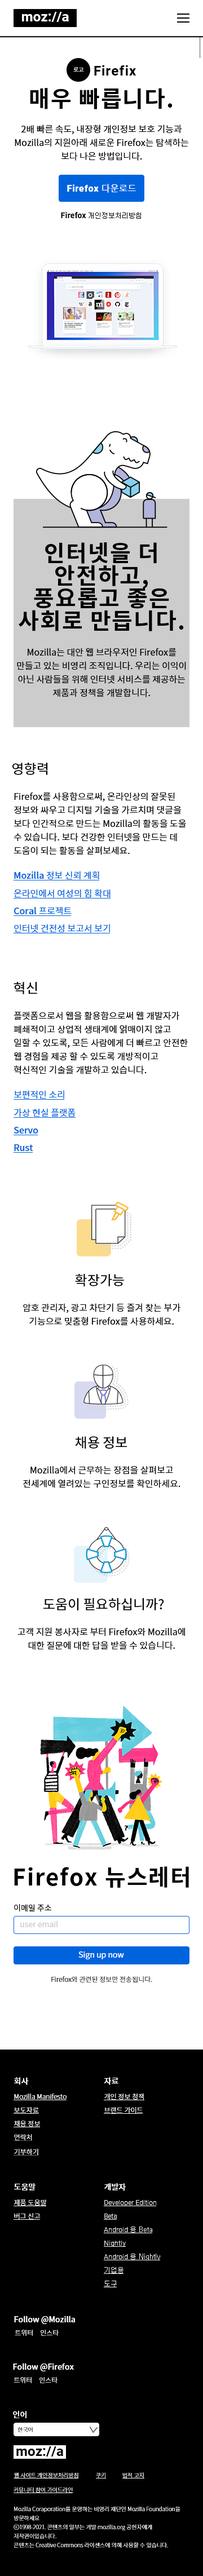
<style>
.page{position:relative;width:203px;height:2576px;background:#ffffff}
.page>*{position:absolute;margin:0}
.t1{font:13.5px "Roboto-Bold";color:#fefefe}
.t2{font:13.5px "Roboto-Bold";letter-spacing:0.05em;color:#000000}
.t3{font:5.6px "NotoSansKR-Regular";color:#ffffff}
.t4{font:22.5px "NotoSansKR-Bold";letter-spacing:0.05em;color:#000000}
.t5{font:9px/13.5px "NotoSansKR-Regular";color:#000000}
.t6{font:9px "Roboto-Black";letter-spacing:0.05em;color:#fefefe}
.t7{font:9px "NotoSansKR-Regular";letter-spacing:0.05em;color:#fefefe}
.t8{font:6.8px "Gulim";color:#000000}
.t9{font:7.9px "Roboto-Bold";color:#000000}
.t10{font:22.5px/22.5px "NotoSansKR-Bold";letter-spacing:0.05em;color:#000000}
.t11{font:13.5px "NotoSansKR-Regular";color:#000000}
.t12{font:9px "NotoSansKR-Regular";color:#0063de}
.t13{font:9px "NotoSansKR-Medium";color:#0063de}
.t14{font:7.9px "NotoSansKR-Regular";color:#000000}
.t15{font:7.9px "NotoSansKR-Regular";color:#cccccc}
.t16{font:7.9px "NotoSansKR-Regular";color:#ffffff}
.t17{font:6.8px "NotoSansKR-Light";color:#000000}
.t18{font:7.9px "NotoSansKR-Medium";color:#fffefe}
.t19{font:6.8px "NotoSansKR-Light";color:#fffefe}
.t20{font:6.8px "Roboto-Light";color:#fffefe}
.t21{font:6.8px "Gulim";color:#fffefe}
.t22{font:5.6px "NotoSansKR-Light";color:#000000}
.t23{font:13.5px "Roboto-Bold";color:#000000}
.t24{font:5.6px "NotoSansKR-Thin";color:#ffffff}
.t25{font:5.6px/9px "NotoSansKR-Thin";color:#ffffff}
</style>
<div class="page">
<p class="t1" style="left:22px;top:12px;width:47px;height:10px">moz://a</p>
<p class="t2" style="left:94px;top:65px;width:42px;height:11px">Firefix</p>
<p class="t3" style="left:73px;top:67px;width:11px;height:5px">로고</p>
<p class="t4" style="left:30px;top:88px;width:142px;height:21px">매우 빠릅니다.</p>
<p class="t5" style="left:15px;top:125px;width:173px;height:36px;text-align:center">2배 빠른 속도, 내장형 개인정보 보호 기능과 Mozilla의 지원아래 새로운 Firefox는 탐색하는 보다 나은 방법입니다.</p>
<p class="t6" style="left:67px;top:184px;width:69px;height:9px">Firefox <span class="t7">다운로드</span></p>
<p class="t8" style="left:61px;top:212px;width:80px;height:7px"><span class="t9">Firefox</span> 개인정보처리방침</p>
<p class="t10" style="left:19px;top:542px;width:165px;height:89px;text-align:center">인터넷을 더 안전하고, 풍요롭고 좋은 사회로 만듭니다.</p>
<p class="t5" style="left:17px;top:648px;width:169px;height:49px;text-align:center">Mozilla는 대안 웹 브라우저인 Firefox를 만들고 있는 비영리 조직입니다. 우리는 이익이 아닌 사람들을 위해 인터넷 서비스를 제공하는 제품과 정책을 개발합니다.</p>
<p class="t11" style="left:12px;top:762px;width:36px;height:13px">영향력</p>
<p class="t5" style="left:14px;top:792px;width:172px;height:63px">Firefox를 사용함으로써, 온라인상의 잘못된 정보와 싸우고 디지털 기술을 가르치며 댓글을 보다 인간적으로 만드는 Mozilla의 활동을 도울 수 있습니다. 보다 건강한 인터넷을 만드는 데 도움이 되는 활동을 살펴보세요.</p>
<p class="t12" style="left:14px;top:871px;width:85px;height:8px"><span class="t13">Mozilla </span>정보 신뢰 계획</p>
<p class="t12" style="left:14px;top:889px;width:96px;height:9px">온라인에서 여성의 힘 확대</p>
<p class="t13" style="left:14px;top:906px;width:58px;height:9px">Coral <span class="t12">프로젝트</span></p>
<p class="t12" style="left:14px;top:924px;width:96px;height:9px">인터넷 건전성 보고서 보기</p>
<p class="t11" style="left:14px;top:982px;width:23px;height:12px">혁신</p>
<p class="t5" style="left:14px;top:1011px;width:174px;height:63px">플랫폼으로서 웹을 활용함으로써 웹 개발자가 폐쇄적이고 상업적 생태계에 얽매이지 않고 일할 수 있도록, 모든 사람에게 더 빠르고 안전한 웹 경험을 제공 할 수 있도록 개방적이고 혁신적인 기술을 개발하고 있습니다.</p>
<p class="t12" style="left:14px;top:1090px;width:50px;height:9px">보편적인 소리</p>
<p class="t12" style="left:14px;top:1108px;width:62px;height:9px">가상 현실 플랫폼</p>
<p class="t13" style="left:14px;top:1127px;width:24px;height:7px">Servo</p>
<p class="t13" style="left:14px;top:1144px;width:19px;height:7px">Rust</p>
<p class="t11" style="left:75px;top:1274px;width:49px;height:12px">확장가능</p>
<p class="t5" style="left:23px;top:1303px;width:157px;height:23px;text-align:center">암호 관리자, 광고 차단기 등 즐겨 찾는 부가 기능으로 밎춤형 Firefox를 사용하세요.</p>
<p class="t11" style="left:75px;top:1436px;width:52px;height:13px">채용 정보</p>
<p class="t5" style="left:23px;top:1466px;width:157px;height:22px;text-align:center">Mozilla에서 근무하는 장점을 살펴보고 전세계에 열려있는 구인정보를 확인하세요.</p>
<p class="t11" style="left:43px;top:1598px;width:121px;height:12px">도움이 필요하십니까?</p>
<p class="t5" style="left:17px;top:1627px;width:168px;height:23px;text-align:center">고객 지원 봉사자로 부터 Firefox와 Mozilla에 대한 질문에 대한 답을 받을 수 있습니다.</p>
<p class="t4" style="left:14px;top:1866px;width:175px;height:22px">Firefox 뉴스레터</p>
<p class="t14" style="left:14px;top:1904px;width:37px;height:8px">이메일 주소</p>
<p class="t15" style="left:20px;top:1920px;width:38px;height:7px">user email</p>
<p class="t16" style="left:78px;top:1951px;width:46px;height:8px">Sign up now</p>
<p class="t17" style="left:51px;top:1976px;width:101px;height:6px">Firefox와 관련된 정보만 전송됩니다.</p>
<p class="t18" style="left:14px;top:2077px;width:15px;height:8px">회사</p>
<p class="t18" style="left:104px;top:2077px;width:14px;height:8px">자료</p>
<p class="t19" style="left:14px;top:2093px;width:53px;height:6px">Mozilla Manifesto</p>
<p class="t19" style="left:104px;top:2093px;width:40px;height:7px">개인 정보 청잭</p>
<p class="t19" style="left:14px;top:2107px;width:25px;height:6px">보도자료</p>
<p class="t19" style="left:104px;top:2107px;width:39px;height:6px">브랜드 가이드</p>
<p class="t19" style="left:14px;top:2121px;width:26px;height:6px">채용 정보</p>
<p class="t19" style="left:14px;top:2134px;width:18px;height:6px">연락처</p>
<p class="t19" style="left:14px;top:2149px;width:24px;height:6px">기부하기</p>
<p class="t18" style="left:14px;top:2183px;width:22px;height:7px">도움말</p>
<p class="t18" style="left:104px;top:2183px;width:22px;height:8px">개발자</p>
<p class="t19" style="left:14px;top:2199px;width:33px;height:7px">제품 도움말</p>
<p class="t20" style="left:104px;top:2200px;width:52px;height:6px">Developer Edition</p>
<p class="t19" style="left:14px;top:2213px;width:27px;height:6px">버그 신고</p>
<p class="t20" style="left:104px;top:2214px;width:13px;height:5px">Beta</p>
<p class="t20" style="left:104px;top:2227px;width:48px;height:6px">Android <span class="t21">용 Beta</span></p>
<p class="t20" style="left:104px;top:2241px;width:22px;height:6px">Nightly</p>
<p class="t21" style="left:104px;top:2254px;width:56px;height:6px"><span class="t20">Android </span>용 Nightly</p>
<p class="t21" style="left:104px;top:2267px;width:19px;height:6px">기업용</p>
<p class="t21" style="left:104px;top:2281px;width:13px;height:6px">도구</p>
<p class="t18" style="left:14px;top:2316px;width:61px;height:8px">Follow @Mozilla</p>
<p class="t19" style="left:15px;top:2330px;width:18px;height:6px">트위터</p>
<p class="t19" style="left:41px;top:2330px;width:18px;height:6px">인스타</p>
<p class="t18" style="left:13px;top:2363px;width:61px;height:8px">Follow @Firefox</p>
<p class="t19" style="left:14px;top:2377px;width:18px;height:6px">트위터</p>
<p class="t19" style="left:39px;top:2377px;width:18px;height:6px">인스타</p>
<p class="t18" style="left:13px;top:2411px;width:13px;height:7px">언어</p>
<p class="t22" style="left:17px;top:2427px;width:16px;height:5px">한국어</p>
<p class="t23" style="left:16px;top:2446px;width:47px;height:11px">moz://a</p>
<p class="t24" style="left:14px;top:2472px;width:64px;height:6px">웹 사이트 개인정보처리방침</p>
<p class="t24" style="left:96px;top:2472px;width:9px;height:6px">쿠키</p>
<p class="t24" style="left:122px;top:2472px;width:22px;height:6px">법적 고지</p>
<p class="t24" style="left:14px;top:2487px;width:59px;height:6px">커뮤니티 참여 가이드라인</p>
<p class="t25" style="left:14px;top:2506px;width:166px;height:42px">Mozilla Coraporation를 운영하는 비영리 재단인 Mozilla Foundation을 방문하세요<br>ⓒ1998-2021. 콘텐츠의 일부는 개발 mozilla.org 공헌자에게  저작권이있습니다.<br>콘텐츠는 Creative Commons 라이센스에 의해 사용할 수 있습니다.</p>
</div>
